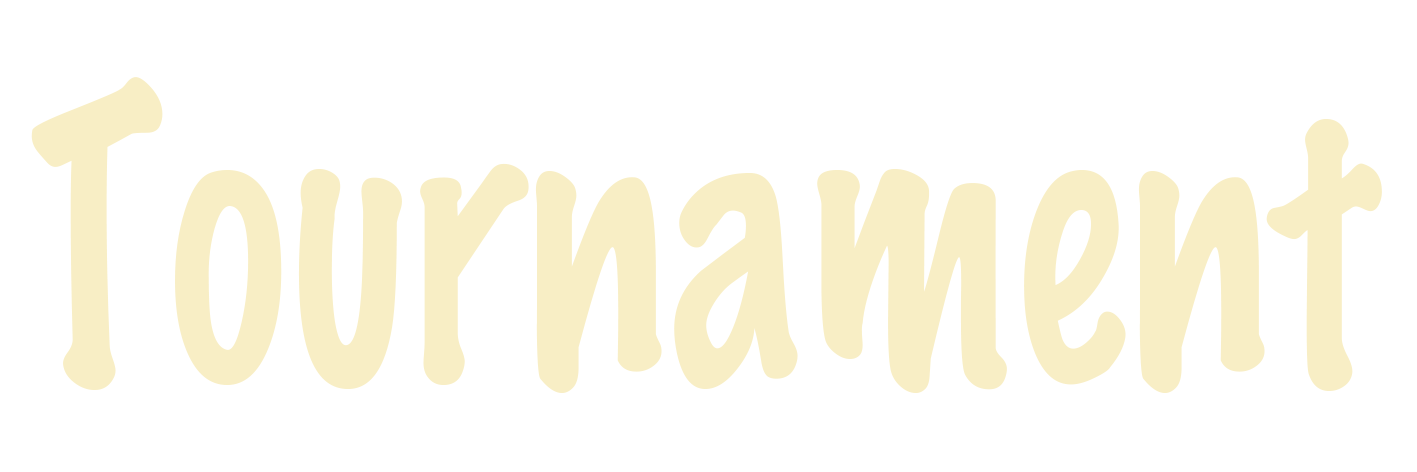
<style>
.page{position:relative;width:1417px;height:472px;background:#ffffff}
.page>*{position:absolute;margin:0}
.t1{font:363.4px "MarkerFelt-Thin";letter-spacing:0.025em;color:#f8eec5;scale:0.77 1}
</style>
<div class="page">
<p class="t1" style="left:31px;top:77px;width:1351px;height:316px">Tournament</p>
</div>
